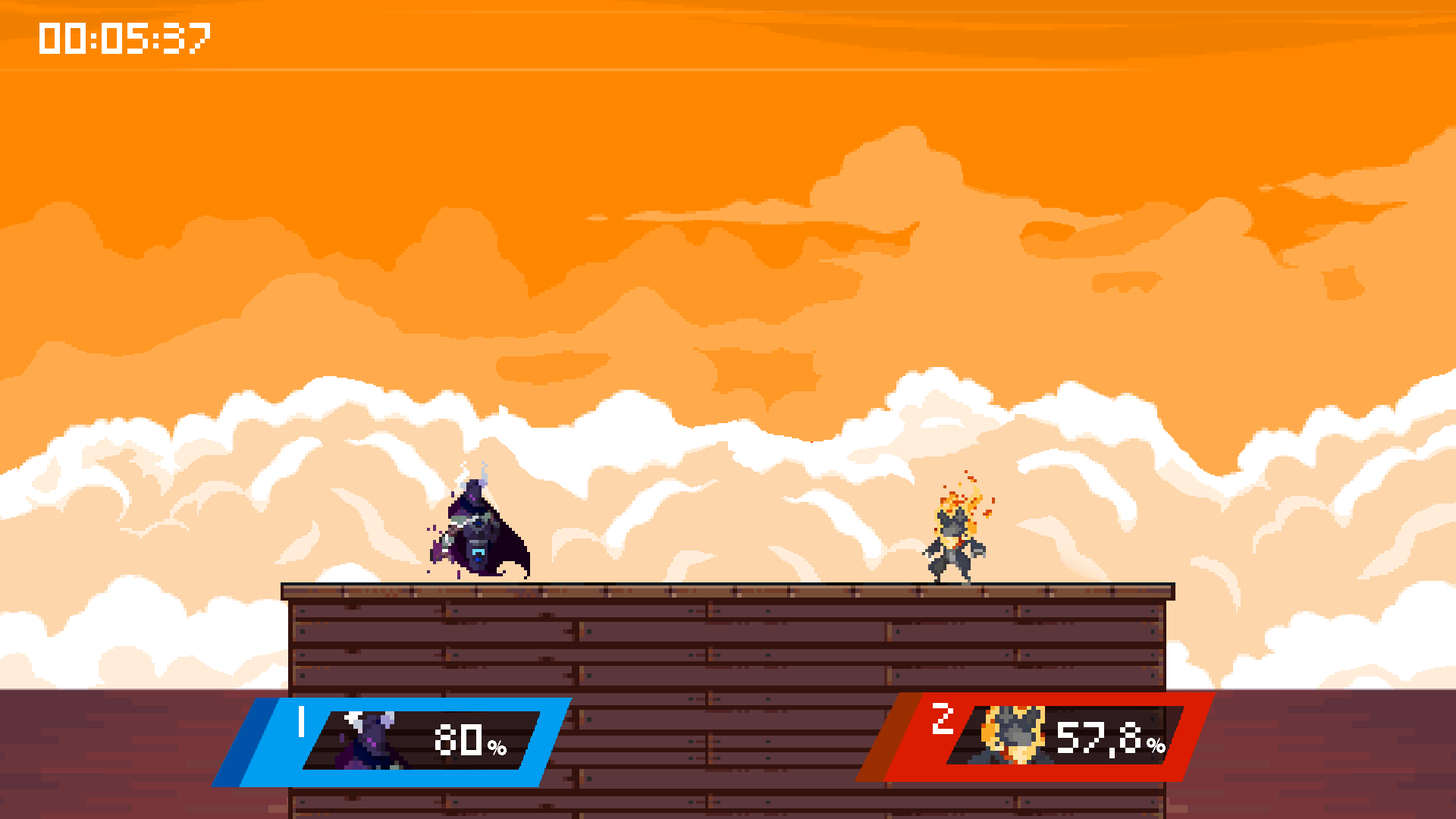
<style>
.page{position:relative;width:1456px;height:819px;background:#ff8700}
.page>*{position:absolute;margin:0}
.t1{font:25.8px "Pixeled";color:#ffffff}
.t2{font:25.8px "BerlinSansFBDemi-Bold";color:#ffffff}
</style>
<div class="page">
<p class="t1" style="left:39px;top:23px;width:171px;height:31px">00:05:37</p>
<p class="t1" style="left:933px;top:703px;width:20px;height:31px">2</p>
<p class="t1" style="left:435px;top:724px;width:72px;height:31px">80<span class="t2">%</span></p>
<p class="t1" style="left:1058px;top:722px;width:108px;height:36px">57,8<span class="t2">%</span></p>
</div>
